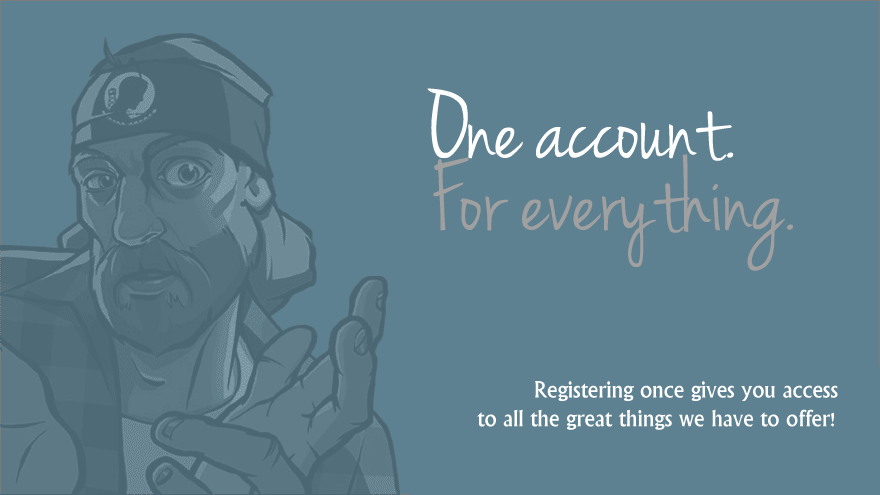
<style>
.page{position:relative;width:880px;height:495px;background:#5d8190}
.page>*{position:absolute;margin:0}
.t1{font:105px/72px "JennaSue";color:#a0a0a0}
.t2{font:105px/72px "JennaSue";color:#ffffff}
.t3{font:24px "Narkisim";color:#ffffff}
</style>
<div class="page">
<p class="t1" style="left:427px;top:88px;width:366px;height:183px"><span class="t2">One account. <br></span>For everything.</p>
<p class="t3" style="left:477px;top:381px;width:361px;height:49px;text-align:right">Registering once gives you access <br>to all the great things we have to offer!</p>
</div>
